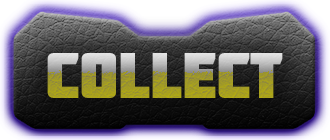
<style>
.page{position:relative;width:330px;height:140px}
.page>*{position:absolute;margin:0}
.t1{font:65px "Molot"}
</style>
<div class="page">
<p class="t1" style="left:47px;top:53px;width:236px;height:45px">COLLECT</p>
</div>
